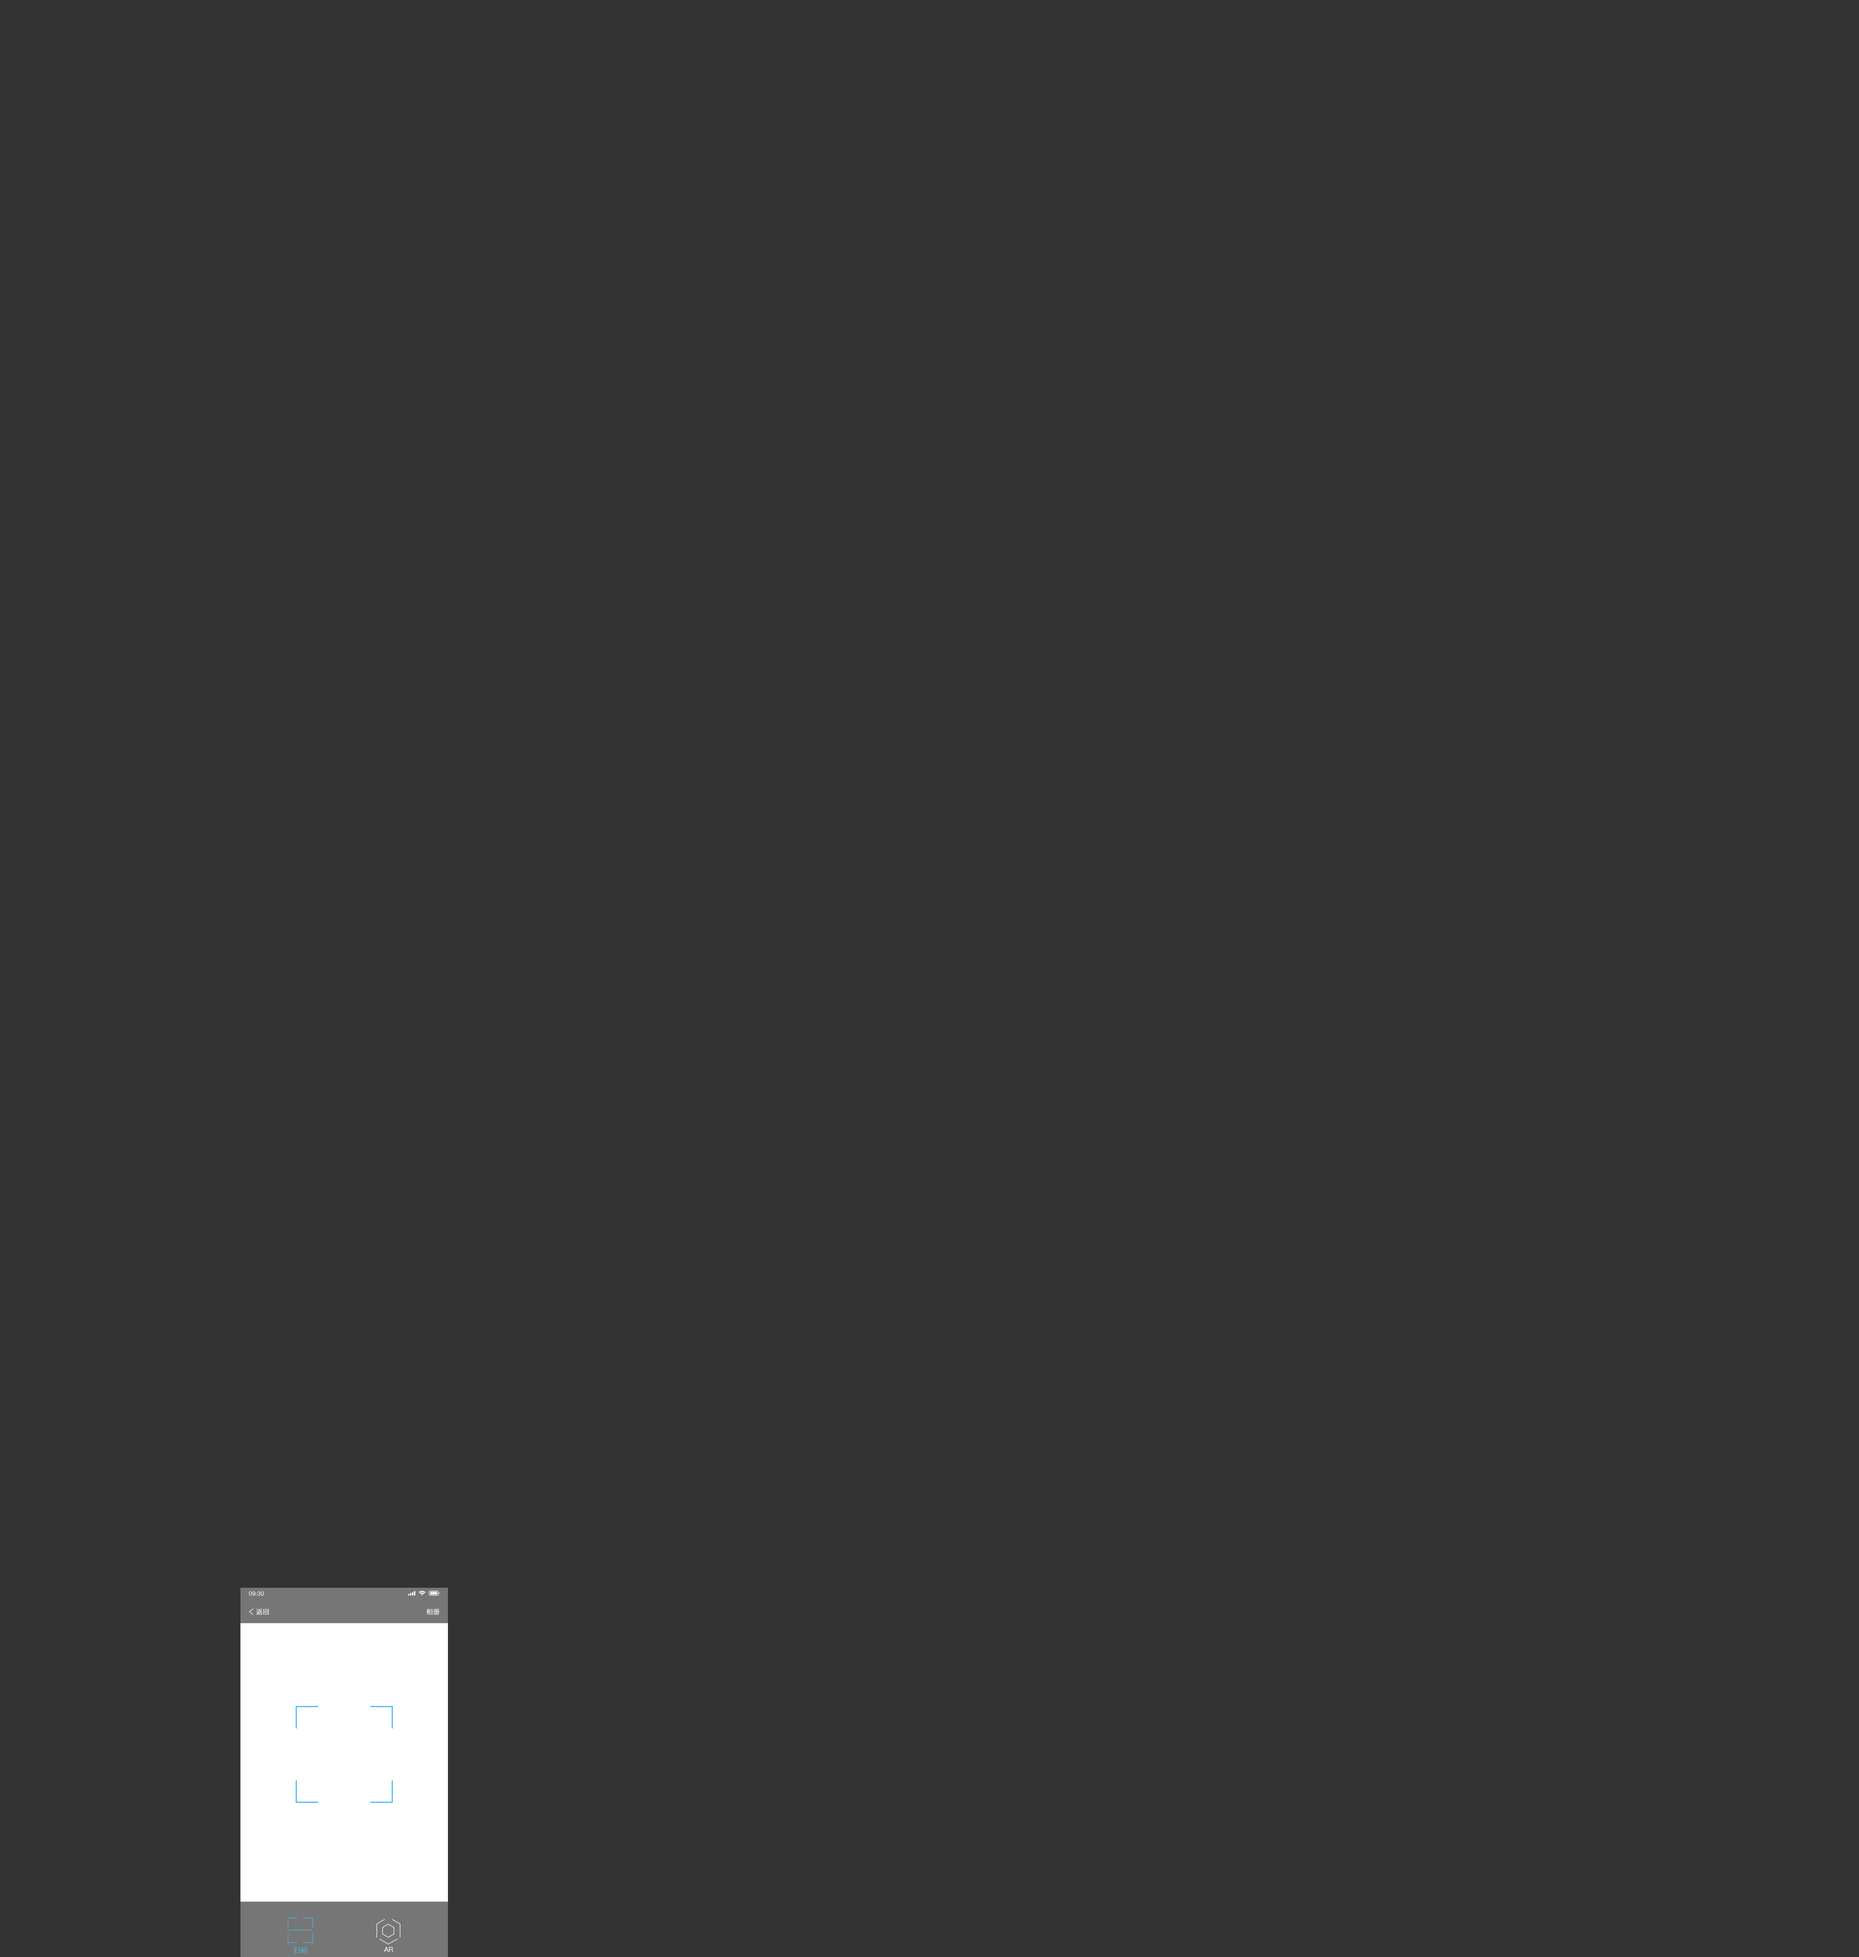
<style>
.page{position:relative;width:1859px;height:1957px;background:#333333}
.page>*{position:absolute;margin:0}
.t1{font:5.5px "PingFang-SC-Regular";color:#ffffff;font-weight:bold}
.t2{font:6.6px "PingFang-SC-Regular";color:#ffffff;font-weight:bold}
.t3{font:6.6px "PingFang-SC-Regular";color:#46b5ee;font-weight:bold}
</style>
<div class="page">
<p class="t1" style="left:249px;top:1591px;width:15px;height:4px">09:30</p>
<p class="t2" style="left:256px;top:1608px;width:13px;height:7px">返回</p>
<p class="t2" style="left:426px;top:1608px;width:14px;height:7px">相册</p>
<p class="t3" style="left:294px;top:1947px;width:13px;height:6px">扫码</p>
<p class="t2" style="left:384px;top:1946px;width:9px;height:6px">AR</p>
</div>
